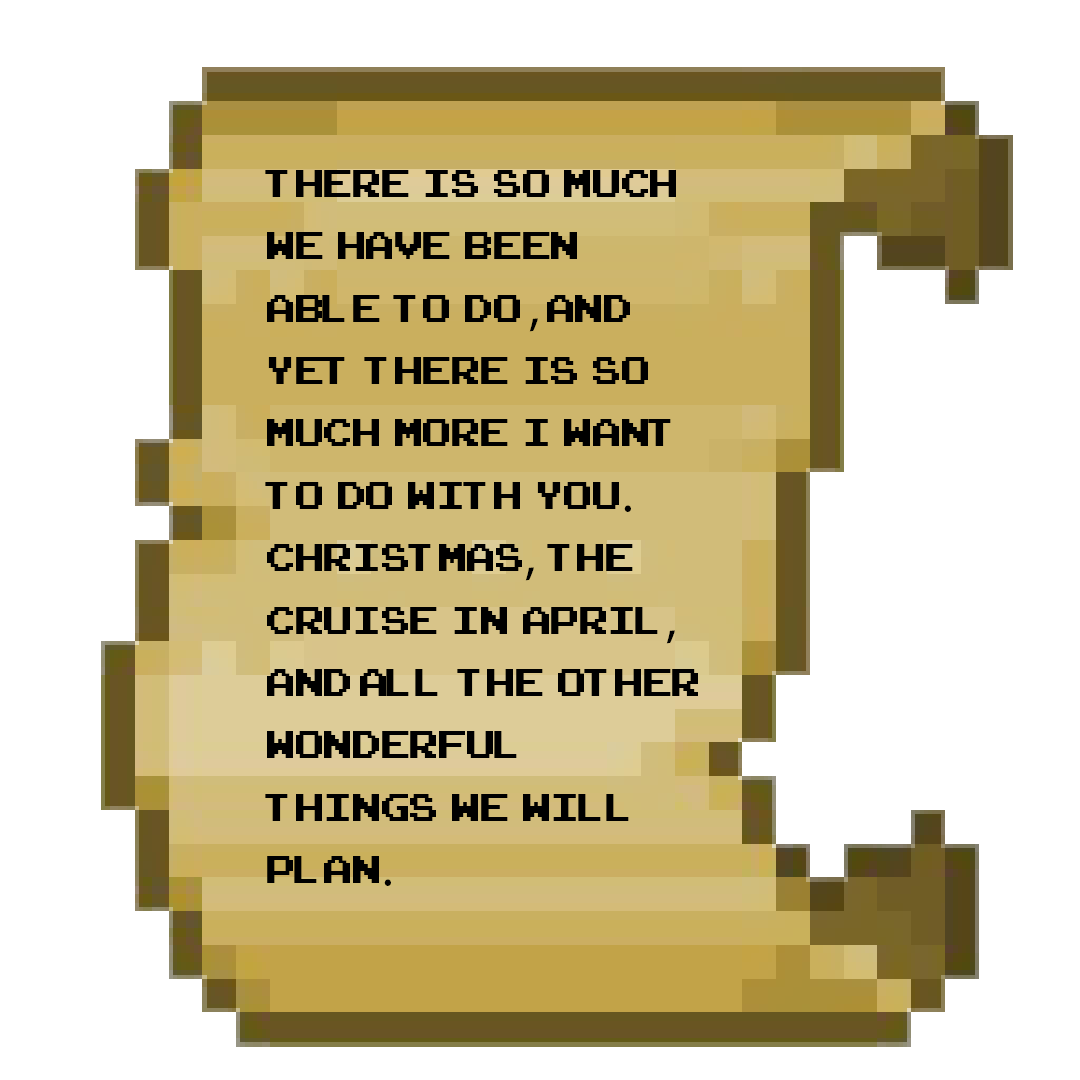
<style>
.page{position:relative;width:1080px;height:1080px;background:#ffffff}
.page>*{position:absolute;margin:0}
.t1{font:52px "ArcadeClassic";color:#000000}
.t2{font:52px "MyriadPro-Regular";color:#000000}
</style>
<div class="page">
<p class="t1" style="left:265px;top:170px;width:433px;height:716px">there  is  so  much  we  have  been  able  to  do <span class="t2">,</span> and  yet  there  is  so  much  more  I  want  to  do  with  you<span class="t2">.</span> Christmas<span class="t2">,</span>  the cruise  in  April<span class="t2">,</span>  and all  the  other wonderful  things  we  will  plan<span class="t2">.</span></p>
</div>
